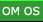
<style>
.page{position:relative;width:43px;height:22px;background:#339933}
.page>*{position:absolute;margin:0}
.t1{font:11px "Verdana";color:#ffffff}
</style>
<div class="page">
<p class="t1" style="left:2px;top:6px;width:38px;height:10px">OM OS</p>
</div>
